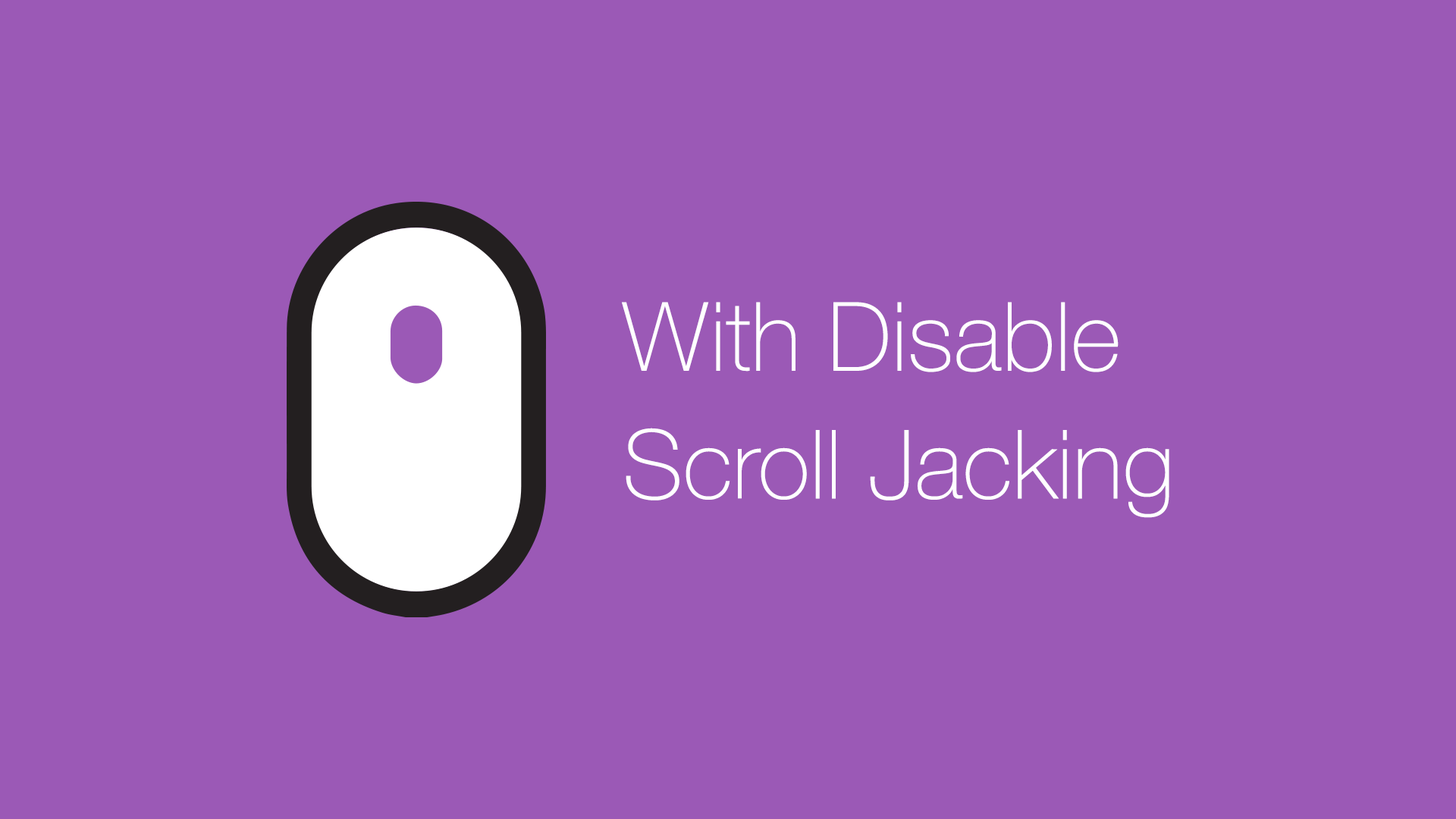
<style>
.page{position:relative;width:1456px;height:819px;background:#9b59b6}
.page>*{position:absolute;margin:0}
.t1{font:95.9px/127.8px "HelveticaNeue-Thin";color:#ffffff}
</style>
<div class="page">
<p class="t1" style="left:622px;top:302px;width:547px;height:216px">With Disable <br>Scroll Jacking</p>
</div>
